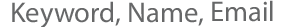
<style>
.page{position:relative;width:283px;height:27px;background:#ffffff}
.page>*{position:absolute;margin:0}
.t1{font:28.5px "MyriadPro-Regular";color:#666768}
</style>
<div class="page">
<p class="t1" style="left:12px;top:0px;width:261px;height:29px">Keyword, Name, Email</p>
</div>
